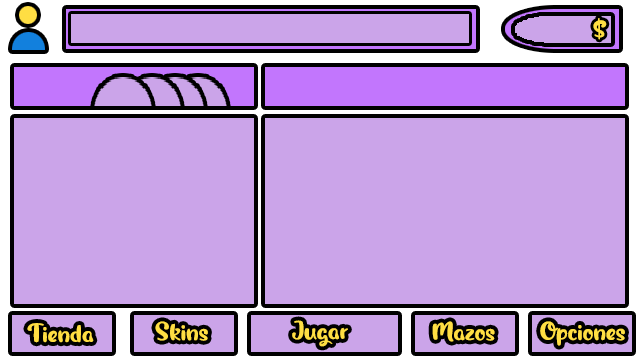
<style>
.page{position:relative;width:638px;height:359px;background:#cba4e9}
.page>*{position:absolute;margin:0}
.t1{font:26.7px "MagicOwl-PersonalUse";color:#ffde43}
</style>
<div class="page">
<p class="t1" style="left:593px;top:18px;width:14px;height:22px">$</p>
<p class="t1" style="left:27px;top:323px;width:67px;height:20px">Tienda</p>
<p class="t1" style="left:155px;top:321px;width:53px;height:20px">Skins</p>
<p class="t1" style="left:292px;top:320px;width:56px;height:27px">Jugar</p>
<p class="t1" style="left:432px;top:321px;width:63px;height:21px">Mazos</p>
<p class="t1" style="left:540px;top:321px;width:85px;height:25px">Opciones</p>
</div>
